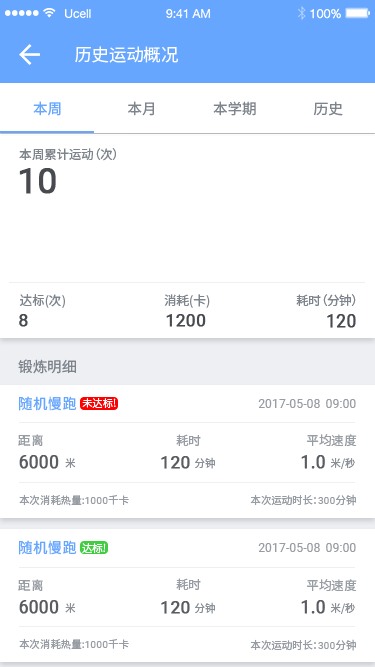
<style>
.page{position:relative;width:375px;height:667px;background:#ffffff}
.page>*{position:absolute;margin:0}
.t1{font:17.4px "NotoSansHans-Regular";color:#ffffff}
.t2{font:14.6px "NotoSansHans-Regular";color:#66a6ff}
.t3{font:14.5px "NotoSansHans-Regular";color:#7e848c}
.t4{font:12.5px "NotoSansHans-Regular";color:#7e848c}
.t5{font:34.9px "Roboto-Regular";color:#474a4f;font-weight:bold}
.t6{font:17.5px "Roboto-Regular";color:#474a4f;font-weight:bold}
.t7{font:17.4px "Roboto-Regular";color:#474a4f;font-weight:bold}
.t8{font:14.6px "NotoSansHans-Regular";color:#7e848c}
.t9{font:10.4px "NotoSansHans-Regular";color:#ffffff}
.t10{font:12.5px "Roboto-Regular";color:#989da3}
.t11{font:12.5px "NotoSansHans-Regular";color:#989da3}
.t12{font:17.6px "Roboto-Regular";color:#474a4f;font-weight:bold}
.t13{font:10.6px "NotoSansHans-Regular";color:#7e848c}
.t14{font:10.5px "NotoSansHans-Regular";color:#7e848c}
.t15{font:10.4px "NotoSansHans-Regular";color:#989da3}
.t16{font:10.4px "Roboto-Regular";color:#989da3}
</style>
<div class="page">
<p class="t1" style="left:75px;top:46px;width:103px;height:17px">历史运动概况</p>
<p class="t2" style="left:33px;top:101px;width:28px;height:15px">本周</p>
<p class="t3" style="left:128px;top:101px;width:26px;height:15px">本月</p>
<p class="t3" style="left:213px;top:101px;width:43px;height:15px">本学期</p>
<p class="t3" style="left:313px;top:101px;width:30px;height:15px">历史</p>
<p class="t4" style="left:19px;top:148px;width:97px;height:13px">本周累计运动（次）</p>
<p class="t5" style="left:19px;top:168px;width:37px;height:26px">10</p>
<p class="t4" style="left:19px;top:294px;width:46px;height:14px">达标(次)</p>
<p class="t4" style="left:164px;top:294px;width:46px;height:14px">消耗(卡)</p>
<p class="t4" style="left:296px;top:294px;width:60px;height:12px">耗时（分钟）</p>
<p class="t6" style="left:19px;top:314px;width:9px;height:13px">8</p>
<p class="t7" style="left:166px;top:314px;width:40px;height:13px">1200</p>
<p class="t6" style="left:327px;top:314px;width:29px;height:14px">120</p>
<p class="t8" style="left:18px;top:359px;width:58px;height:15px">锻炼明细</p>
<p class="t2" style="left:19px;top:396px;width:58px;height:15px">随机慢跑</p>
<p class="t9" style="left:82px;top:398px;width:34px;height:10px">未达标!</p>
<p class="t10" style="left:258px;top:399px;width:98px;height:9px">2017-05-08  09:00</p>
<p class="t11" style="left:18px;top:434px;width:25px;height:12px">距离</p>
<p class="t11" style="left:176px;top:434px;width:25px;height:12px">耗时</p>
<p class="t11" style="left:307px;top:434px;width:50px;height:12px">平均速度</p>
<p class="t12" style="left:19px;top:455px;width:40px;height:14px;opacity:0.9">6000</p>
<p class="t13" style="left:65px;top:458px;width:11px;height:10px;opacity:0.9">米</p>
<p class="t7" style="left:161px;top:456px;width:29px;height:13px;opacity:0.9">120</p>
<p class="t14" style="left:195px;top:457px;width:20px;height:12px;opacity:0.9">分钟</p>
<p class="t12" style="left:301px;top:455px;width:24px;height:14px;opacity:0.9">1.0</p>
<p class="t13" style="left:330px;top:458px;width:25px;height:11px;opacity:0.9">米/秒</p>
<p class="t15" style="left:19px;top:494px;width:110px;height:12px">本次消耗热量:<span class="t16">1000</span>千卡</p>
<p class="t15" style="left:250px;top:494px;width:106px;height:12px">本次运动时长：<span class="t16">300</span>分钟</p>
<p class="t2" style="left:19px;top:540px;width:58px;height:15px">随机慢跑</p>
<p class="t9" style="left:82px;top:543px;width:24px;height:10px">达标!</p>
<p class="t10" style="left:258px;top:543px;width:98px;height:9px">2017-05-08  09:00</p>
<p class="t11" style="left:18px;top:579px;width:25px;height:12px">距离</p>
<p class="t11" style="left:176px;top:578px;width:25px;height:12px">耗时</p>
<p class="t11" style="left:307px;top:579px;width:50px;height:12px">平均速度</p>
<p class="t12" style="left:19px;top:600px;width:40px;height:14px;opacity:0.9">6000</p>
<p class="t13" style="left:65px;top:603px;width:11px;height:10px;opacity:0.9">米</p>
<p class="t7" style="left:161px;top:601px;width:29px;height:13px;opacity:0.9">120</p>
<p class="t14" style="left:195px;top:602px;width:20px;height:12px;opacity:0.9">分钟</p>
<p class="t12" style="left:301px;top:600px;width:24px;height:14px;opacity:0.9">1.0</p>
<p class="t13" style="left:330px;top:603px;width:25px;height:11px;opacity:0.9">米/秒</p>
<p class="t15" style="left:19px;top:638px;width:110px;height:12px">本次消耗热量:<span class="t16">1000</span>千卡</p>
<p class="t15" style="left:250px;top:639px;width:106px;height:12px">本次运动时长：<span class="t16">300</span>分钟</p>
</div>
